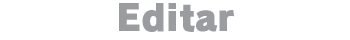
<style>
.page{position:relative;width:350px;height:40px;background:#ffffff}
.page>*{position:absolute;margin:0}
.t1{font:36px "RodinPro-UB";color:#9a9c9f}
</style>
<div class="page">
<p class="t1" style="left:119px;top:3px;width:116px;height:29px">Editar</p>
</div>
